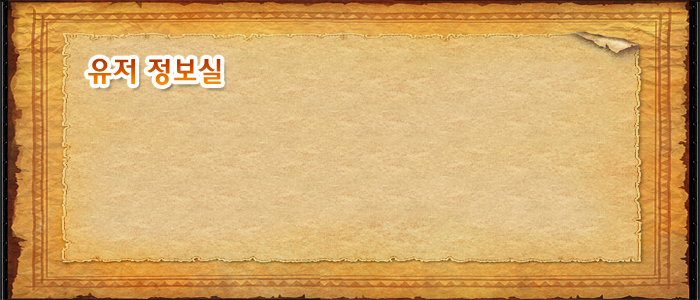
<style>
.page{position:relative;width:700px;height:300px}
.page>*{position:absolute;margin:0}
.t1{font:30px "2002L"}
</style>
<div class="page">
<p class="t1" style="left:88px;top:58px;width:133px;height:27px">유저 정보실</p>
</div>
